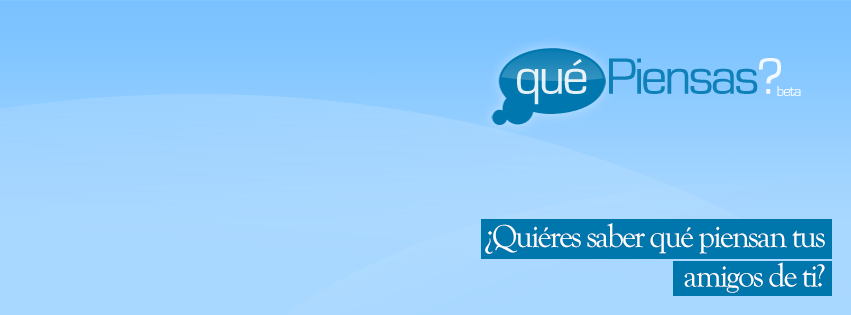
<style>
.page{position:relative;width:851px;height:315px}
.page>*{position:absolute;margin:0}
.t1{font:33px "GoudyOldStyleT-Regular";letter-spacing:-0.06em;color:#ffffff}
</style>
<div class="page">
<p class="t1" style="left:485px;top:223px;width:340px;height:70px;text-align:right">¿Quiéres saber qué piensan tus amigos de ti?</p>
</div>
